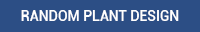
<style>
.page{position:relative;width:200px;height:32px;background:#2c4e85}
.page>*{position:absolute;margin:0}
.t1{font:14px "Roboto-Medium";color:#ffffff}
</style>
<div class="page">
<p class="t1" style="left:21px;top:10px;width:158px;height:11px">RANDOM PLANT DESIGN</p>
</div>
